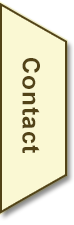
<style>
.page{position:relative;width:74px;height:225px;background:#faf8d3}
.page>*{position:absolute;margin:0}
.t1{font:24px "Arial-BoldMT";letter-spacing:0.05em;color:#524317}
</style>
<div class="page">
<p class="t1" style="left:22px;top:58px;width:18px;height:95px;rotate:90deg">Contact</p>
</div>
